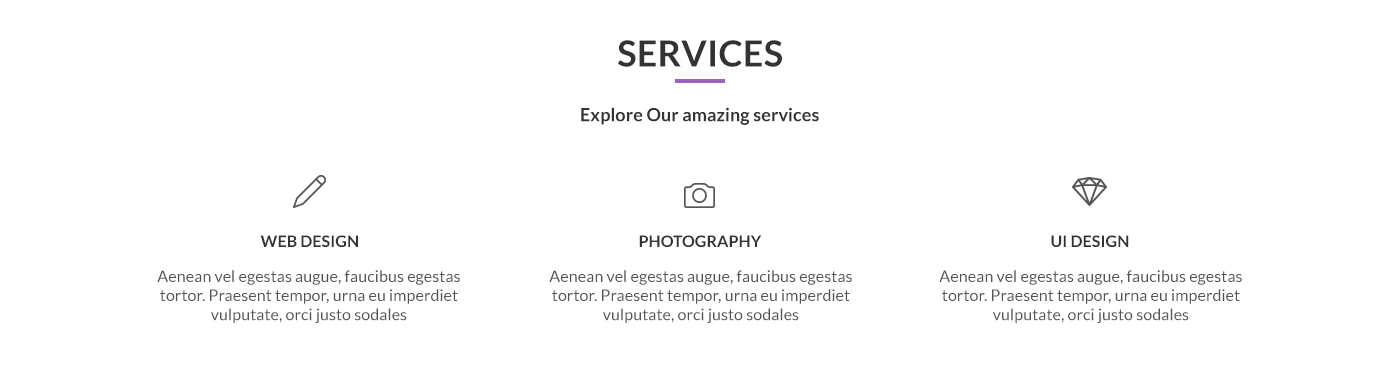
<style>
.page{position:relative;width:1400px;height:375px;background:#ffffff}
.page>*{position:absolute;margin:0}
.t1{font:36px "Lato-Bold";letter-spacing:0.005em;color:#333333}
.t2{font:18px "Lato-Bold";letter-spacing:0.005em;color:#333333}
.t3{font:16px "Lato-Bold";letter-spacing:0.005em;color:#333333}
.t4{font:16px "Lato-Regular";letter-spacing:0.005em;color:#555555}
</style>
<div class="page">
<p class="t1" style="left:618px;top:40px;width:164px;height:27px">SERVICES</p>
<p class="t2" style="left:581px;top:107px;width:238px;height:18px">Explore Our amazing services</p>
<p class="t3" style="left:260px;top:235px;width:98px;height:12px">WEB DESIGN</p>
<p class="t3" style="left:639px;top:235px;width:123px;height:12px">PHOTOGRAPHY</p>
<p class="t3" style="left:1051px;top:235px;width:78px;height:12px">UI DESIGN</p>
<p class="t4" style="left:157px;top:270px;width:303px;height:53px;text-align:center">Aenean vel egestas augue, faucibus egestas tortor. Praesent tempor, urna eu imperdiet vulputate, orci justo sodales</p>
<p class="t4" style="left:549px;top:270px;width:303px;height:53px;text-align:center">Aenean vel egestas augue, faucibus egestas tortor. Praesent tempor, urna eu imperdiet vulputate, orci justo sodales</p>
<p class="t4" style="left:939px;top:270px;width:303px;height:53px;text-align:center">Aenean vel egestas augue, faucibus egestas tortor. Praesent tempor, urna eu imperdiet vulputate, orci justo sodales</p>
</div>
